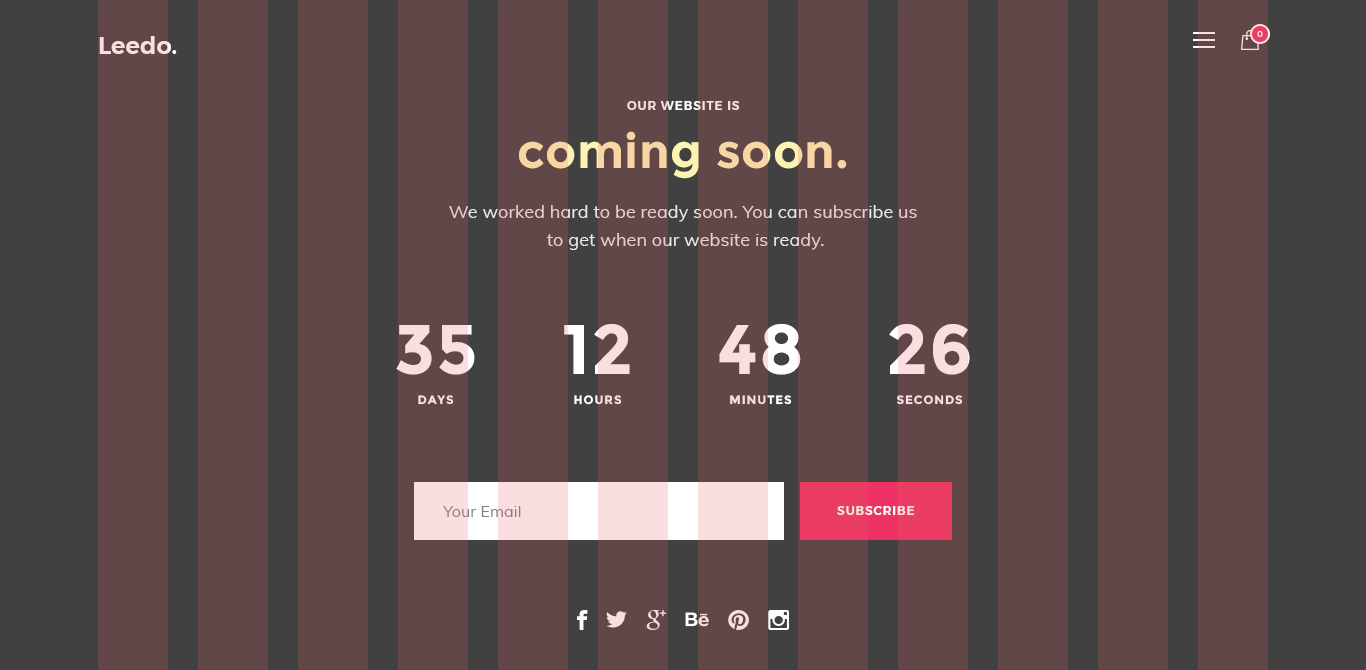
<style>
.page{position:relative;width:1366px;height:670px;background:#614747}
.page>*{position:absolute;margin:0}
.t1{font:24px "Montserrat-SemiBold";color:#f9dfdf}
.t2{font:8px "Montserrat-Medium";letter-spacing:0.05em;color:#f9dfdf;text-transform:uppercase}
.t3{font:12px "Montserrat-SemiBold";letter-spacing:0.075em;text-transform:uppercase}
.t4{font:48px "Montserrat-Bold";letter-spacing:0.01em}
.t5{font:18px/28px "Muli-Regular";letter-spacing:0.005em}
.t6{font:12px/30px "Montserrat-Bold";letter-spacing:0.075em;color:#f9dfdf;text-transform:uppercase}
.t7{font:70px/30px "Montserrat-Bold";letter-spacing:0.01em;color:#f9dfdf}
.t8{font:12px/30px "Montserrat-Bold";letter-spacing:0.075em;text-transform:uppercase}
.t9{font:70px/30px "Montserrat-Bold";letter-spacing:0.01em}
.t10{font:16px "Muli-Regular";letter-spacing:0.005em;color:#818181}
</style>
<div class="page">
<p class="t1" style="left:99px;top:36px;width:78px;height:18px">Leedo.</p>
<p class="t2" style="left:1257px;top:31px;width:6px;height:6px">0</p>
<p class="t3" style="left:627px;top:101px;width:113px;height:9px">our website is</p>
<p class="t4" style="left:519px;top:131px;width:328px;height:48px">coming soon.</p>
<p class="t5" style="left:449px;top:205px;width:468px;height:45px;text-align:center">We worked hard to be ready soon. You can subscribe us <br>to get when our website is ready.</p>
<p class="t6" style="left:396px;top:325px;width:79px;height:80px;text-align:center"><span class="t7">35<br></span>days</p>
<p class="t8" style="left:564px;top:324px;width:66px;height:81px;text-align:center"><span class="t9">12<br></span>hours</p>
<p class="t8" style="left:719px;top:324px;width:82px;height:81px;text-align:center"><span class="t9">48<br></span>minutes</p>
<p class="t6" style="left:889px;top:324px;width:81px;height:81px;text-align:center"><span class="t7">26<br></span>seconds</p>
<p class="t10" style="left:443px;top:506px;width:78px;height:11px">Your Email</p>
<p class="t3" style="left:837px;top:506px;width:78px;height:9px">subscribe</p>
</div>
